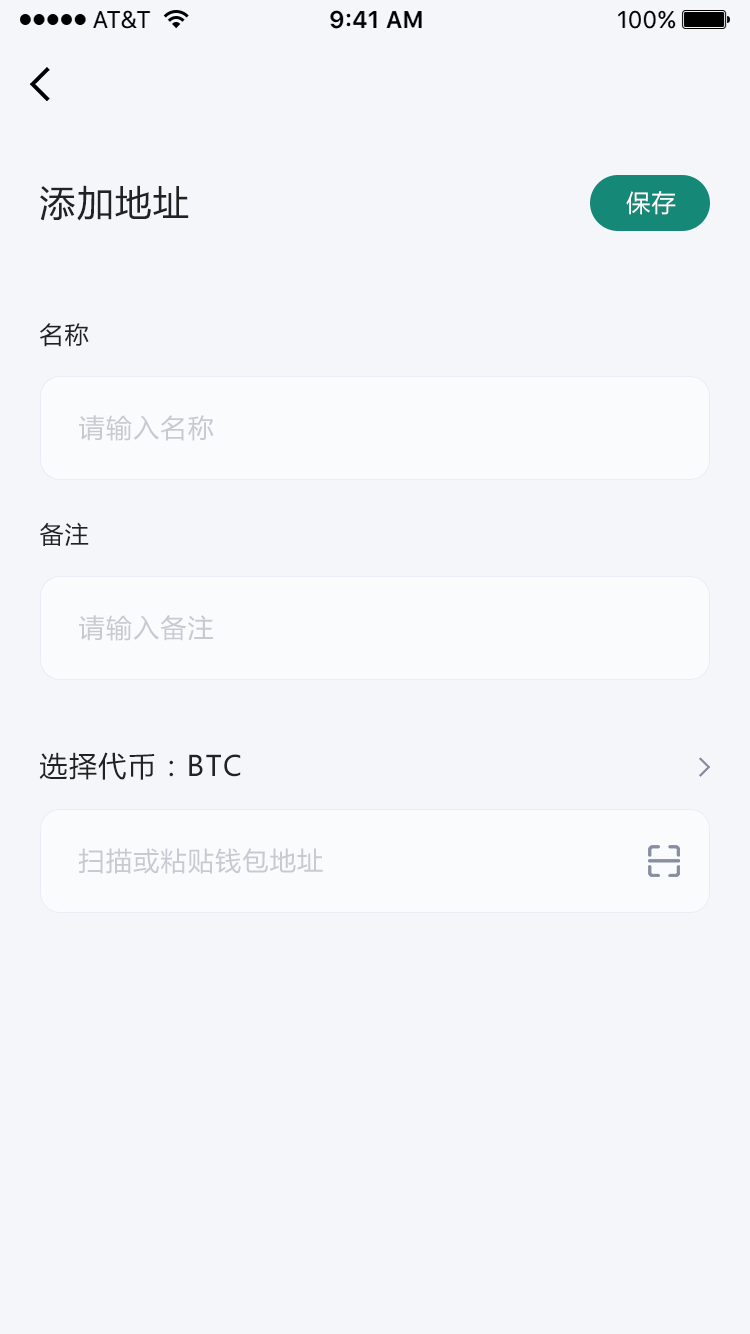
<style>
.page{position:relative;width:750px;height:1334px;background:#f5f6fa}
.page>*{position:absolute;margin:0}
.t1{font:36px "MicrosoftYaHei";letter-spacing:0.05em;color:#222222}
.t2{font:24px "MicrosoftYaHei";letter-spacing:0.05em;color:#ffffff}
.t3{font:24px "MicrosoftYaHei";letter-spacing:0.05em;color:#222222}
.t4{font:26px "MicrosoftYaHei";letter-spacing:0.05em;color:#c8cad2}
.t5{font:28px "MicrosoftYaHei";letter-spacing:0.05em;color:#222222}
</style>
<div class="page">
<p class="t1" style="left:40px;top:185px;width:149px;height:36px">添加地址</p>
<p class="t2" style="left:626px;top:191px;width:50px;height:24px">保存</p>
<p class="t3" style="left:39px;top:323px;width:50px;height:24px">名称</p>
<p class="t4" style="left:79px;top:415px;width:135px;height:26px">请输入名称</p>
<p class="t3" style="left:39px;top:522px;width:50px;height:24px">备注</p>
<p class="t4" style="left:79px;top:615px;width:134px;height:26px">请输入备注</p>
<p class="t5" style="left:39px;top:752px;width:202px;height:28px">选择代币：BTC</p>
<p class="t4" style="left:78px;top:848px;width:245px;height:26px">扫描或粘贴钱包地址</p>
</div>
